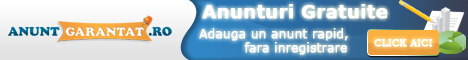
<style>
.page{position:relative;width:468px;height:60px}
.page>*{position:absolute;margin:0}
.t1{font:18px "Verdana-Bold";color:#ffffff;font-weight:bold}
.t2{font:12px "Verdana";color:#ffffff;font-weight:bold}
.t3{font:10px "BookmanOldStyle";color:#ffffff;font-weight:bold}
</style>
<div class="page">
<p class="t1" style="left:202px;top:4px;width:186px;height:15px">Anunturi Gratuite</p>
<p class="t2" style="left:199px;top:28px;width:149px;height:27px;text-align:justify">Adauga un anunt rapid,<br>          fara inregistrare</p>
<p class="t3" style="left:374px;top:39px;width:59px;height:8px">CLICK AICI</p>
</div>
